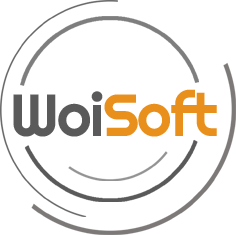
<style>
.page{position:relative;width:236px;height:235px;background:#ffffff}
.page>*{position:absolute;margin:0}
.t1{font:59.3px "Righteous-Regular";letter-spacing:-0.025em;color:#e98f1b}
.t2{font:59.3px "Righteous-Regular";letter-spacing:-0.025em;color:#5a5a5a}
</style>
<div class="page">
<p class="t1" style="left:13px;top:89px;width:204px;height:48px"><span class="t2">Woi</span>Soft</p>
</div>
